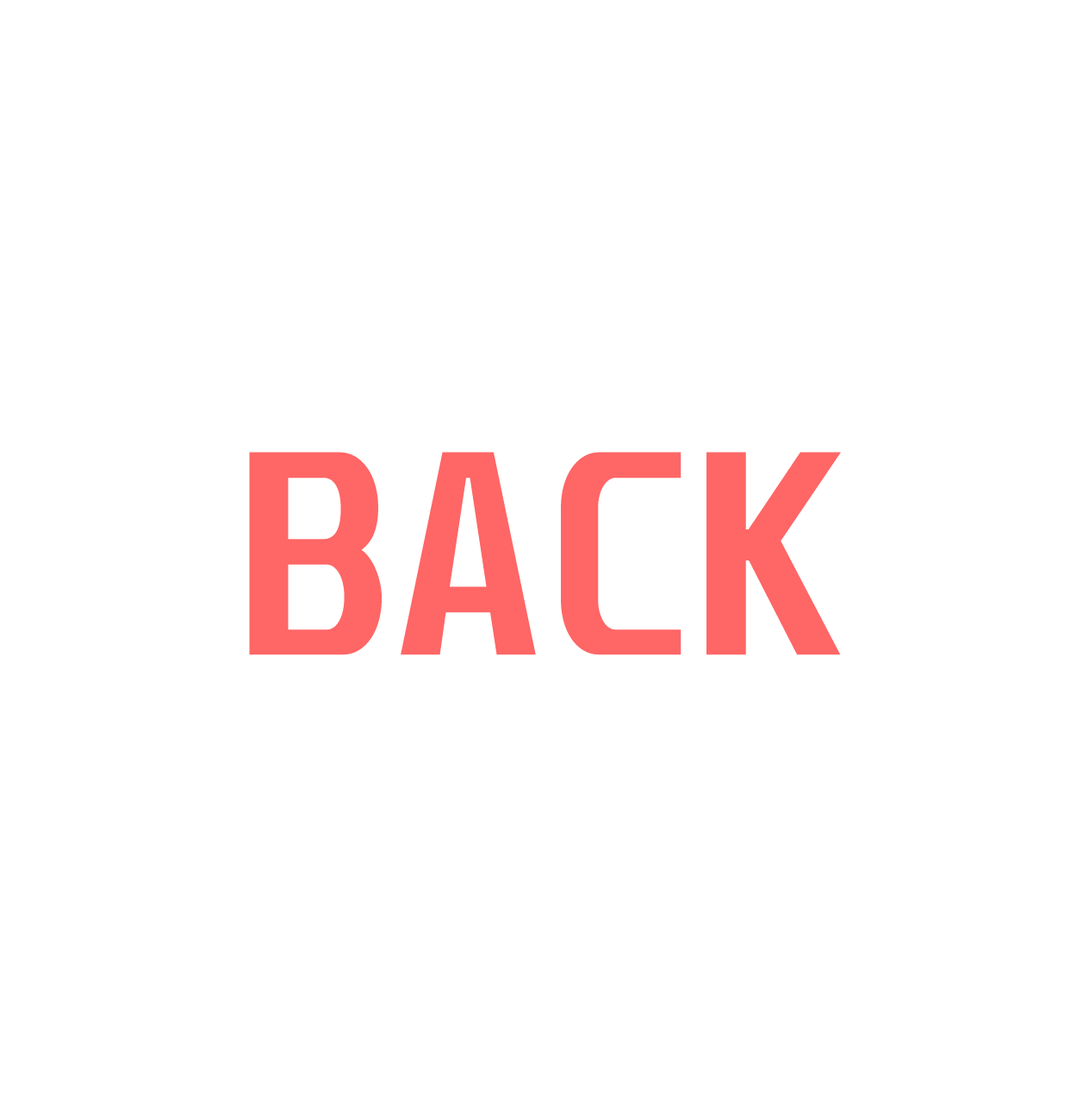
<style>
.page{position:relative;width:1089px;height:1095px;background:#ffffff}
.page>*{position:absolute;margin:0}
.t1{font:249.9px "Unispace-Bold";color:#ff6666}
</style>
<div class="page">
<p class="t1" style="left:249px;top:452px;width:592px;height:203px">BACK</p>
</div>
